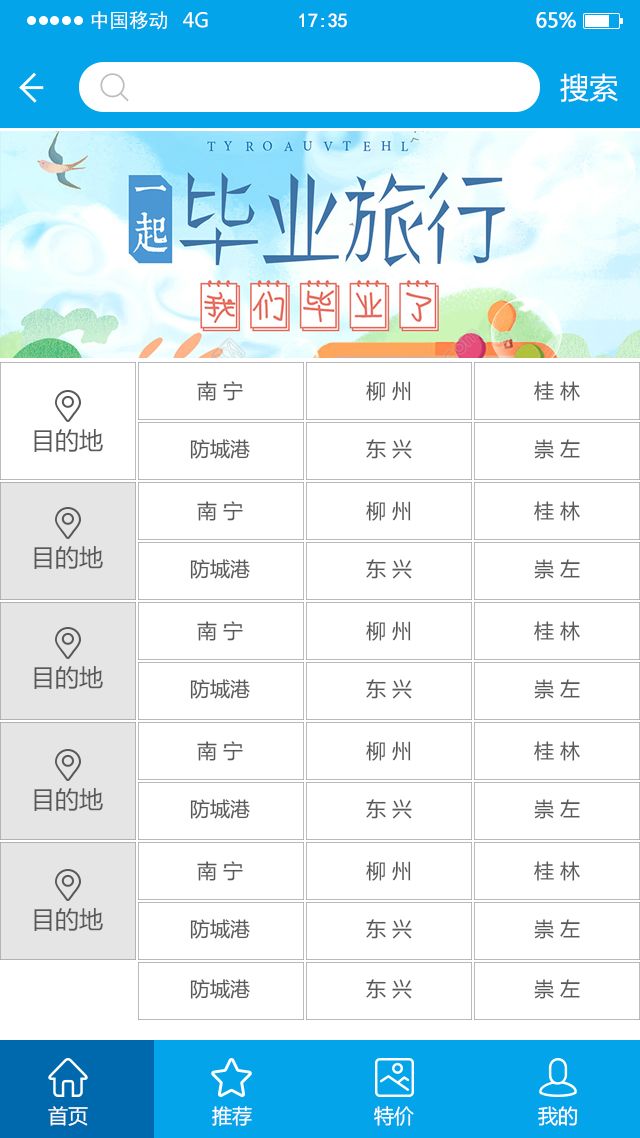
<style>
.page{position:relative;width:640px;height:1138px;background:#ffffff}
.page>*{position:absolute;margin:0}
.t1{font:19.7px "SimHei";color:#ffffff}
.t2{font:19.7px "MicrosoftYaHei";color:#ffffff}
.t3{font:19.7px "SimHei";letter-spacing:-0.022em;color:#ffffff;font-weight:bold}
.t4{font:19.7px "MicrosoftYaHei";letter-spacing:-0.022em;color:#ffffff;font-weight:bold}
.t5{font:29.1px "MicrosoftYaHei";color:#ffffff}
.t6{font:20px "MicrosoftYaHei";color:#585858}
.t7{font:24px "MicrosoftYaHei";color:#585858}
.t8{font:20px "MicrosoftYaHei";color:#ffffff}
</style>
<div class="page">
<p class="t1" style="left:91px;top:11px;width:76px;height:19px">中国移动</p>
<p class="t2" style="left:183px;top:12px;width:25px;height:16px">4G</p>
<p class="t3" style="left:299px;top:13px;width:48px;height:15px">17:35</p>
<p class="t4" style="left:536px;top:12px;width:40px;height:16px">65%</p>
<p class="t5" style="left:560px;top:73px;width:58px;height:29px">搜索</p>
<p class="t6" style="left:197px;top:381px;width:46px;height:20px">南 宁</p>
<p class="t6" style="left:366px;top:381px;width:45px;height:20px">柳 州</p>
<p class="t6" style="left:534px;top:381px;width:46px;height:20px">桂 林</p>
<p class="t7" style="left:34px;top:429px;width:69px;height:23px">目的地</p>
<p class="t6" style="left:190px;top:439px;width:60px;height:20px">防城港</p>
<p class="t6" style="left:366px;top:439px;width:46px;height:20px">东 兴</p>
<p class="t6" style="left:534px;top:439px;width:46px;height:20px">崇 左</p>
<p class="t6" style="left:197px;top:501px;width:46px;height:20px">南 宁</p>
<p class="t6" style="left:366px;top:501px;width:45px;height:20px">柳 州</p>
<p class="t6" style="left:534px;top:501px;width:46px;height:20px">桂 林</p>
<p class="t7" style="left:34px;top:546px;width:69px;height:23px">目的地</p>
<p class="t6" style="left:190px;top:559px;width:60px;height:20px">防城港</p>
<p class="t6" style="left:366px;top:559px;width:46px;height:20px">东 兴</p>
<p class="t6" style="left:534px;top:559px;width:46px;height:20px">崇 左</p>
<p class="t6" style="left:197px;top:621px;width:46px;height:20px">南 宁</p>
<p class="t6" style="left:366px;top:621px;width:45px;height:20px">柳 州</p>
<p class="t6" style="left:534px;top:621px;width:46px;height:20px">桂 林</p>
<p class="t7" style="left:34px;top:666px;width:69px;height:23px">目的地</p>
<p class="t6" style="left:190px;top:679px;width:60px;height:20px">防城港</p>
<p class="t6" style="left:366px;top:679px;width:46px;height:20px">东 兴</p>
<p class="t6" style="left:534px;top:679px;width:46px;height:20px">崇 左</p>
<p class="t6" style="left:197px;top:741px;width:46px;height:20px">南 宁</p>
<p class="t6" style="left:366px;top:741px;width:45px;height:20px">柳 州</p>
<p class="t6" style="left:534px;top:741px;width:46px;height:20px">桂 林</p>
<p class="t7" style="left:34px;top:788px;width:69px;height:23px">目的地</p>
<p class="t6" style="left:190px;top:799px;width:60px;height:20px">防城港</p>
<p class="t6" style="left:366px;top:799px;width:46px;height:20px">东 兴</p>
<p class="t6" style="left:534px;top:799px;width:46px;height:20px">崇 左</p>
<p class="t6" style="left:197px;top:861px;width:46px;height:20px">南 宁</p>
<p class="t6" style="left:366px;top:861px;width:45px;height:20px">柳 州</p>
<p class="t6" style="left:534px;top:861px;width:46px;height:20px">桂 林</p>
<p class="t7" style="left:34px;top:908px;width:69px;height:23px">目的地</p>
<p class="t6" style="left:190px;top:919px;width:60px;height:20px">防城港</p>
<p class="t6" style="left:366px;top:919px;width:46px;height:20px">东 兴</p>
<p class="t6" style="left:534px;top:919px;width:46px;height:20px">崇 左</p>
<p class="t6" style="left:190px;top:979px;width:60px;height:20px">防城港</p>
<p class="t6" style="left:366px;top:979px;width:46px;height:20px">东 兴</p>
<p class="t6" style="left:534px;top:979px;width:46px;height:20px">崇 左</p>
<p class="t8" style="left:48px;top:1106px;width:40px;height:20px">首页</p>
<p class="t8" style="left:212px;top:1106px;width:40px;height:20px">推荐</p>
<p class="t8" style="left:374px;top:1106px;width:40px;height:20px">特价</p>
<p class="t8" style="left:538px;top:1106px;width:40px;height:20px">我的</p>
</div>
